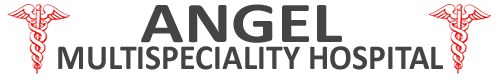
<style>
.page{position:relative;width:500px;height:80px;background:#ffffff}
.page>*{position:absolute;margin:0}
.t1{font:58.1px "Calibri-Bold";color:#444444;scale:1.24 1}
.t2{font:35.2px "Calibri-Bold";color:#444444;scale:0.96 1}
.t3{font:4.2px "Calibri-Bold";color:#444444;scale:0.96 1}
</style>
<div class="page">
<p class="t1" style="left:141px;top:4px;width:201px;height:39px">ANGEL</p>
<p class="t2" style="left:58px;top:46px;width:385px;height:24px"><span class="t3"><br></span>MULTISPECIALITY HOSPITAL</p>
</div>
